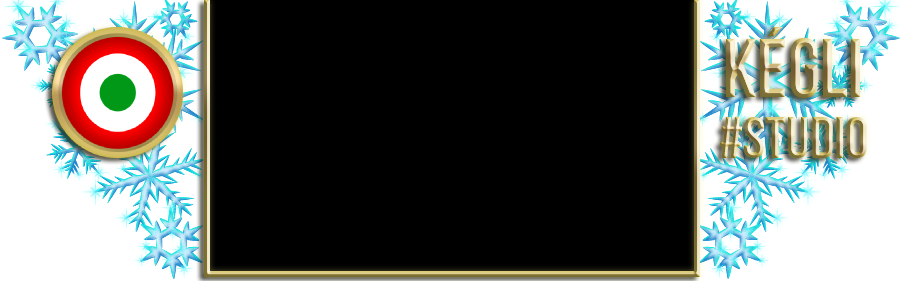
<style>
.page{position:relative;width:904px;height:281px;background:#000000}
.page>*{position:absolute;margin:0}
.t1{font:82.6px "BebasNeue"}
.t2{font:58.3px "BebasNeue"}
</style>
<div class="page">
<p class="t1" style="left:726px;top:27px;width:134px;height:71px">Kégli</p>
<p class="t2" style="left:720px;top:117px;width:147px;height:41px">#studio</p>
</div>
